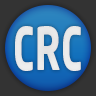
<style>
.page{position:relative;width:96px;height:96px;background:#333333}
.page>*{position:absolute;margin:0}
.t1{font:58.5px "NeoTech-Bold";color:#ffffff;scale:0.66 1}
</style>
<div class="page">
<p class="t1" style="left:15px;top:26px;width:66px;height:45px">CRC</p>
</div>
